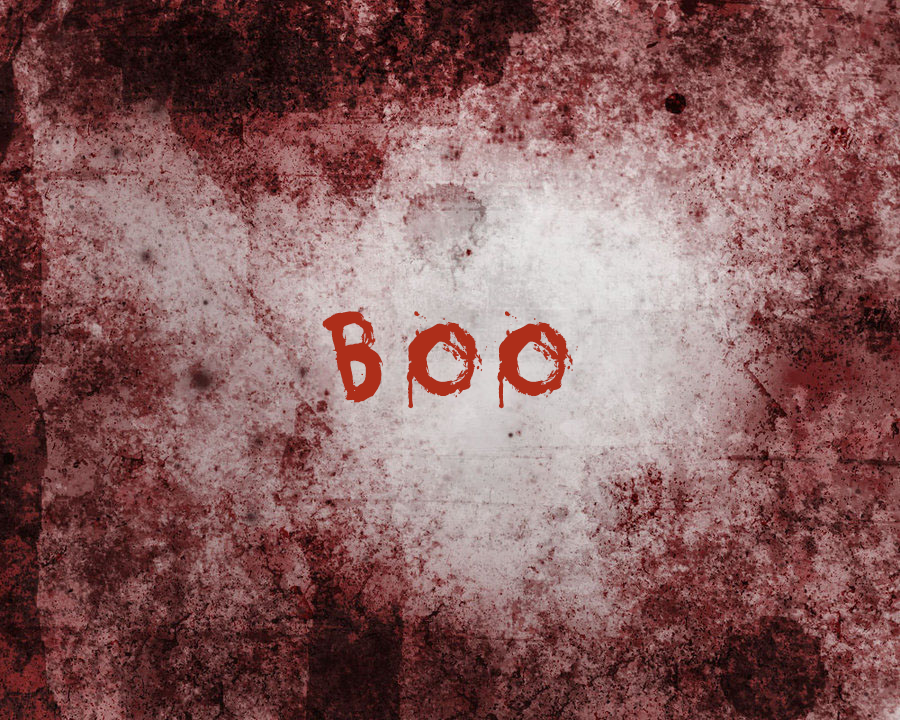
<style>
.page{position:relative;width:900px;height:720px}
.page>*{position:absolute;margin:0}
.t1{font:180px "YouMurdererBB";letter-spacing:0.1em;color:#ad2e1a}
</style>
<div class="page">
<p class="t1" style="left:322px;top:311px;width:256px;height:98px">Boo</p>
</div>
